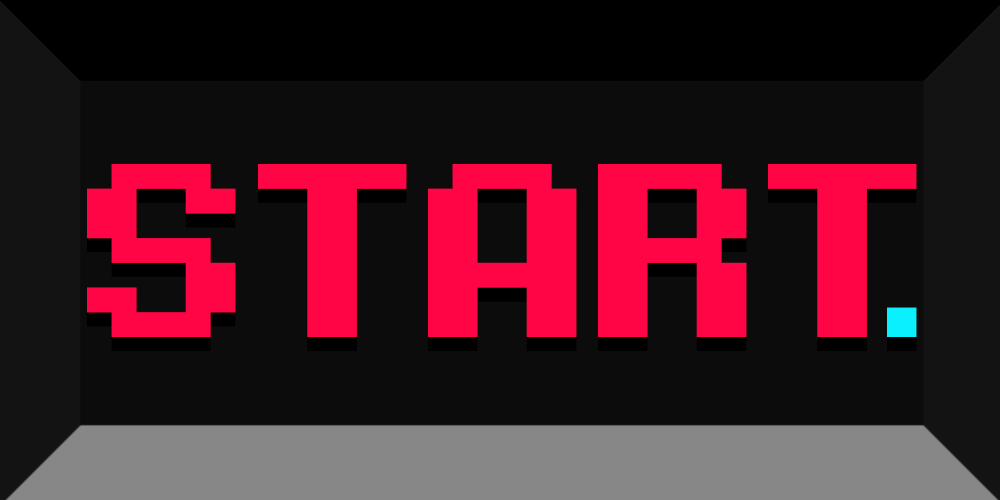
<style>
.page{position:relative;width:1000px;height:500px;background:#0c0c0c}
.page>*{position:absolute;margin:0}
.t1{font:252.6px "PixelDigivolve";letter-spacing:-0.01em;color:#ff0546}
.t2{font:300px "PixelDigivolve";letter-spacing:-0.01em;color:#0af0ff}
</style>
<div class="page">
<p class="t1" style="left:87px;top:164px;width:830px;height:173px">Start</p>
<p class="t2" style="left:887px;top:307px;width:30px;height:30px">.</p>
</div>
